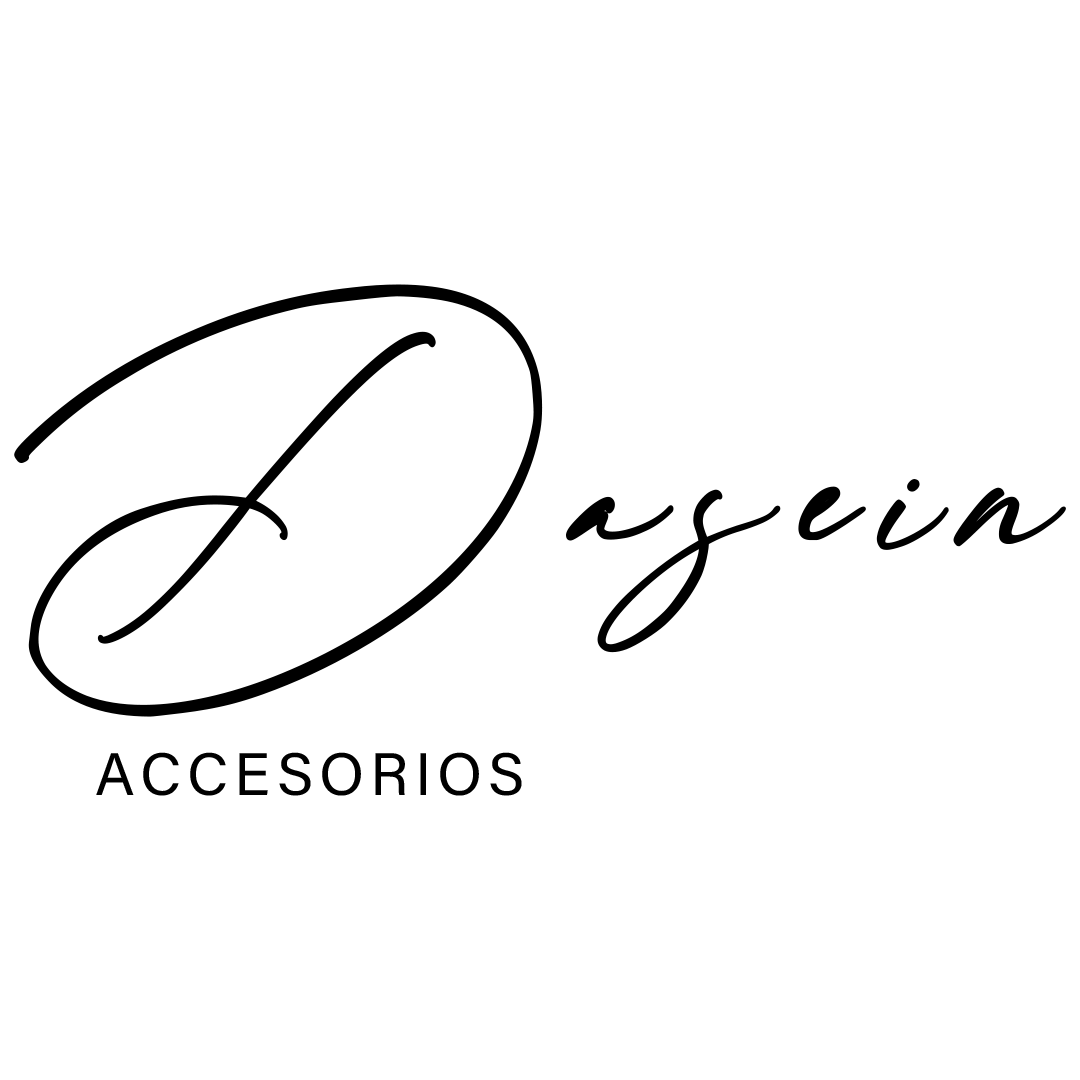
<style>
.page{position:relative;width:1080px;height:1080px;background:#ffffff}
.page>*{position:absolute;margin:0}
.t1{font:300px "Rellington";letter-spacing:0.08em;color:#000000;font-weight:bold;font-style:italic}
.t2{font:60px "AcuminConcept-Regular";letter-spacing:0.1em;color:#000000;font-weight:bold;font-style:italic}
</style>
<div class="page">
<p class="t1" style="left:14px;top:284px;width:1052px;height:433px">Dasein</p>
<p class="t2" style="left:96px;top:752px;width:426px;height:44px">ACCESORIOS</p>
</div>
